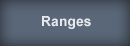
<style>
.page{position:relative;width:130px;height:46px;background:#5a6778}
.page>*{position:absolute;margin:0}
.t1{font:14px "Arial-BoldMT";color:#e6e8eb}
</style>
<div class="page">
<p class="t1" style="left:42px;top:16px;width:49px;height:13px">Ranges</p>
</div>
